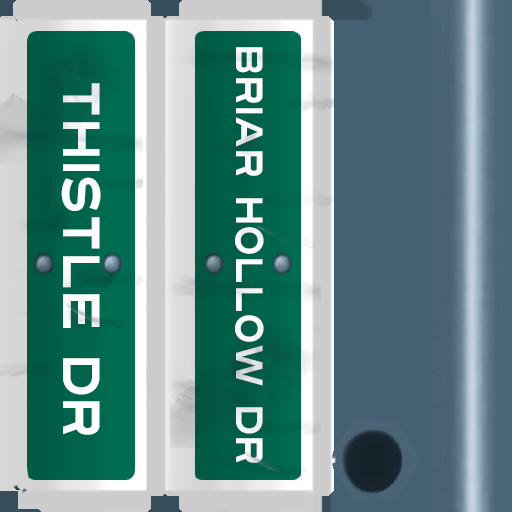
<style>
.page{position:relative;width:512px;height:512px}
.page>*{position:absolute;margin:0}
.t1{font:38px "Turnpike";color:#fefeff;scale:0.75 1}
.t2{font:52px "Turnpike";color:#fefeff;scale:0.75 1}
</style>
<div class="page">
<p class="t1" style="left:235px;top:47px;width:29px;height:416px;rotate:90deg">Briar Hollow Dr</p>
<p class="t2" style="left:61px;top:83px;width:40px;height:352px;rotate:90deg">Thistle Dr</p>
</div>
